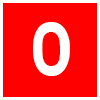
<style>
.page{position:relative;width:100px;height:100px;background:#ff0000}
.page>*{position:absolute;margin:0}
.t1{font:72px "ELEGANCE";color:#ffffff}
</style>
<div class="page">
<p class="t1" style="left:33px;top:22px;width:37px;height:54px">0</p>
</div>
